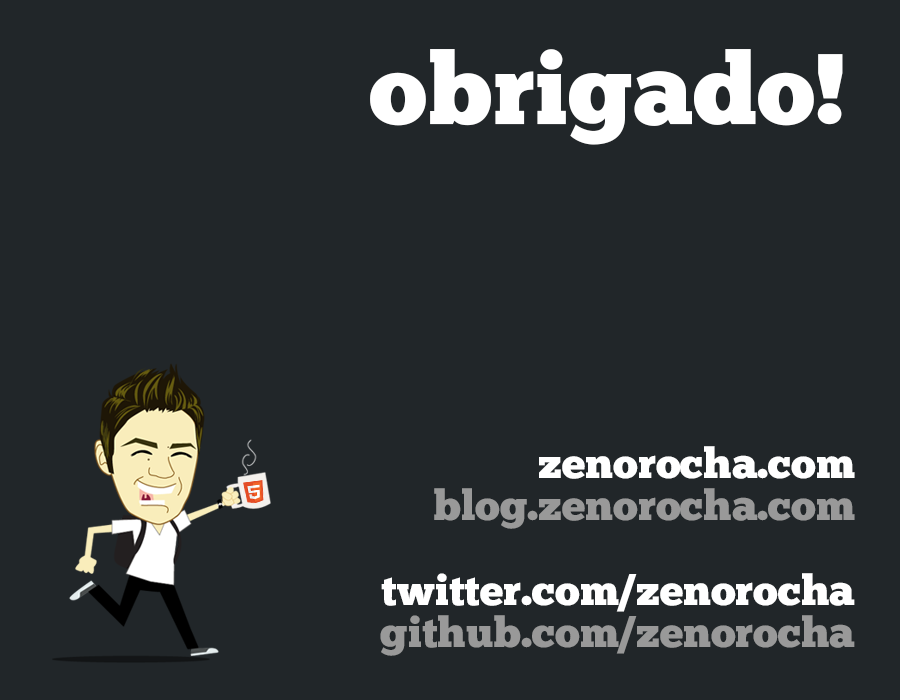
<style>
.page{position:relative;width:900px;height:700px;background:#212629}
.page>*{position:absolute;margin:0}
.t1{font:99.9px "ChunkFive-Roman";color:#ffffff}
.t2{font:42.2px/42.2px "ChunkFive-Roman";color:#ffffff}
.t3{font:42.2px/42.2px "ChunkFive-Roman";color:#999999}
</style>
<div class="page">
<p class="t1" style="left:370px;top:49px;width:473px;height:96px">obrigado!</p>
<p class="t2" style="left:380px;top:446px;width:475px;height:210px;text-align:right">zenorocha.com<br><span class="t3">blog.zenorocha.com<br><br></span>twitter.com/zenorocha<br><span class="t3">github.com/zenorocha</span></p>
</div>
